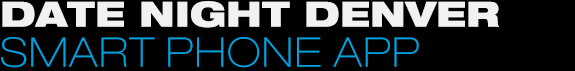
<style>
.page{position:relative;width:575px;height:71px;background:#000000}
.page>*{position:absolute;margin:0}
.t1{font:35px/39.9px "HelveticaNeue-BlackExt";color:#f1f1f2;text-transform:uppercase}
.t2{font:41px/39.9px "HelveticaNeue-ThinExt";letter-spacing:0.04em;color:#02a0dc;text-transform:uppercase}
</style>
<div class="page">
<p class="t1" style="left:1px;top:1px;width:498px;height:67px">Date night denver<br><span class="t2">smart phone app</span></p>
</div>
